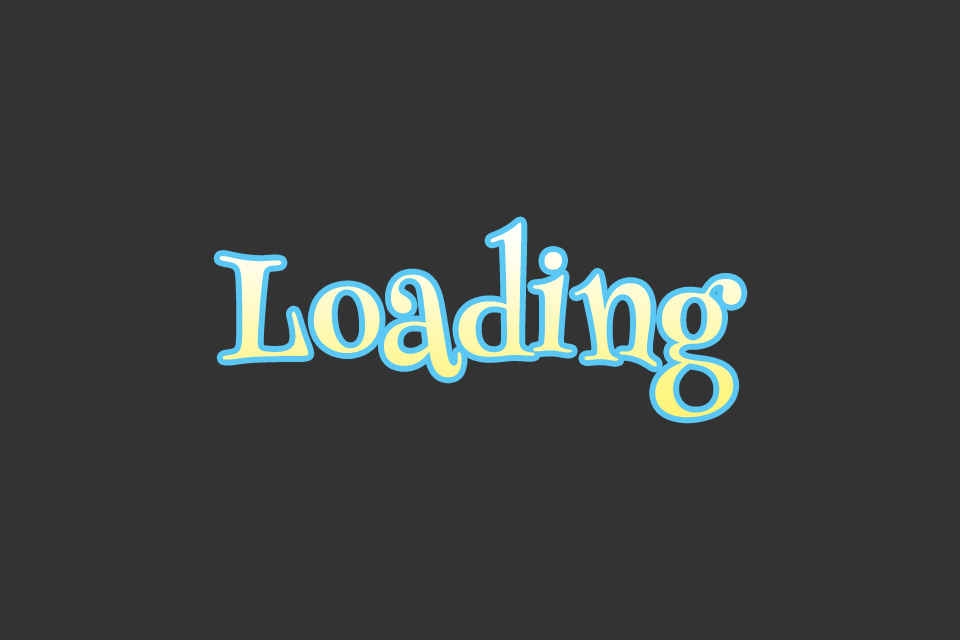
<style>
.page{position:relative;width:960px;height:640px;background:#333333}
.page>*{position:absolute;margin:0}
.t1{font:141.6px "HennyPenny-Regular"}
</style>
<div class="page">
<p class="t1" style="left:219px;top:222px;width:523px;height:196px">Loading</p>
</div>
